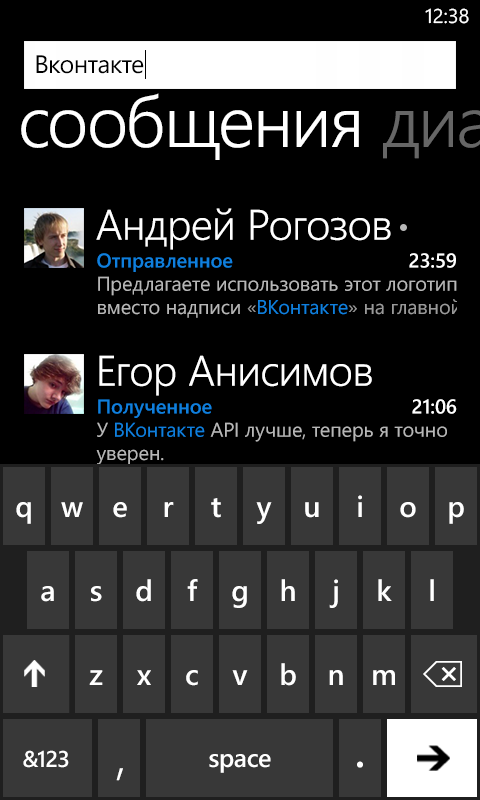
<style>
.page{position:relative;width:480px;height:800px;background:#000000}
.page>*{position:absolute;margin:0}
.t1{font:20px "SegoeWP";color:#ffffff}
.t2{font:25.3px "SegoeWP";letter-spacing:-0.025em;color:#000000}
.t3{font:42.7px "SegoeWP-SemiLight";letter-spacing:-0.01em;color:#ffffff}
.t4{font:20px/23.3px "SegoeWP";color:#999999}
.t5{font:20px/23.3px "SegoeWP-Semibold";color:#1080dd}
.t6{font:20px/23.3px "SegoeWP";color:#b8b8b8}
.t7{font:20px/23.3px "SegoeWP";color:#1080dd}
.t8{font:20px "SegoeWP-Semibold";letter-spacing:-0.01em;color:#ffffff}
.t9{font:29.3px "SegoeWP-Semibold";letter-spacing:-0.01em;color:#ffffff}
.t10{font:22.7px "SegoeWP-Semibold";letter-spacing:-0.01em;color:#ffffff}
.t11{font:25.3px "SegoeWP-Semibold";letter-spacing:-0.01em;color:#ffffff}
.t12{font:64px "SegoeWP-SemiLight";letter-spacing:-0.01em;color:#ffffff}
.t13{font:50.7px "SegoeWP-SemiLight";letter-spacing:-0.01em;color:#ffffff}
</style>
<div class="page">
<p class="t1" style="left:425px;top:8px;width:44px;height:16px">12:38</p>
<p class="t2" style="left:36px;top:55px;width:108px;height:19px">Вконтакте</p>
<p class="t3" style="left:96px;top:208px;width:295px;height:42px">Андрей Рогозов</p>
<p class="t4" style="left:97px;top:253px;width:364px;height:65px"><span class="t5">Отправленное<br></span><span class="t6">Предлагаете использовать этот логотип вместо надписи </span>«<span class="t7">ВКонтакте</span>» на главной странице и на страницах входа и регистрации?</p>
<p class="t8" style="left:409px;top:253px;width:47px;height:15px">23:59</p>
<p class="t3" style="left:99px;top:355px;width:273px;height:41px">Егор Анисимов</p>
<p class="t6" style="left:96px;top:399px;width:351px;height:66px"><span class="t5">Полученное<br></span>У <span class="t7">ВКонтакте </span>API лучше, теперь я точно уверен.</p>
<p class="t8" style="left:412px;top:399px;width:45px;height:15px">21:06</p>
<p class="t9" style="left:358px;top:495px;width:4px;height:22px">i</p>
<p class="t9" style="left:16px;top:502px;width:15px;height:22px">q</p>
<p class="t9" style="left:61px;top:502px;width:22px;height:15px">w</p>
<p class="t9" style="left:113px;top:502px;width:14px;height:16px">e</p>
<p class="t9" style="left:164px;top:502px;width:10px;height:15px">r</p>
<p class="t9" style="left:211px;top:498px;width:10px;height:20px">t</p>
<p class="t9" style="left:256px;top:502px;width:16px;height:22px">y</p>
<p class="t9" style="left:305px;top:502px;width:14px;height:16px">u</p>
<p class="t9" style="left:400px;top:502px;width:16px;height:16px">o</p>
<p class="t9" style="left:449px;top:502px;width:15px;height:22px">p</p>
<p class="t9" style="left:136px;top:579px;width:15px;height:23px">d</p>
<p class="t9" style="left:187px;top:579px;width:11px;height:22px">f</p>
<p class="t9" style="left:281px;top:579px;width:14px;height:22px">h</p>
<p class="t9" style="left:329px;top:579px;width:9px;height:29px">j</p>
<p class="t9" style="left:378px;top:579px;width:14px;height:22px">k</p>
<p class="t9" style="left:430px;top:579px;width:4px;height:22px">l</p>
<p class="t9" style="left:41px;top:586px;width:13px;height:16px">a</p>
<p class="t9" style="left:91px;top:586px;width:11px;height:16px">s</p>
<p class="t9" style="left:232px;top:586px;width:15px;height:22px">g</p>
<p class="t9" style="left:281px;top:663px;width:15px;height:23px">b</p>
<p class="t9" style="left:89px;top:670px;width:14px;height:15px">z</p>
<p class="t9" style="left:137px;top:670px;width:14px;height:15px">x</p>
<p class="t9" style="left:186px;top:670px;width:12px;height:16px">c</p>
<p class="t9" style="left:232px;top:670px;width:16px;height:15px">v</p>
<p class="t9" style="left:329px;top:670px;width:14px;height:15px">n</p>
<p class="t9" style="left:373px;top:670px;width:22px;height:15px">m</p>
<p class="t10" style="left:23px;top:750px;width:46px;height:18px">&amp;123</p>
<p class="t11" style="left:209px;top:754px;width:62px;height:19px">space</p>
<p class="t12" style="left:357px;top:761px;width:6px;height:7px">.</p>
<p class="t13" style="left:116px;top:768px;width:7px;height:13px">,</p>
</div>
